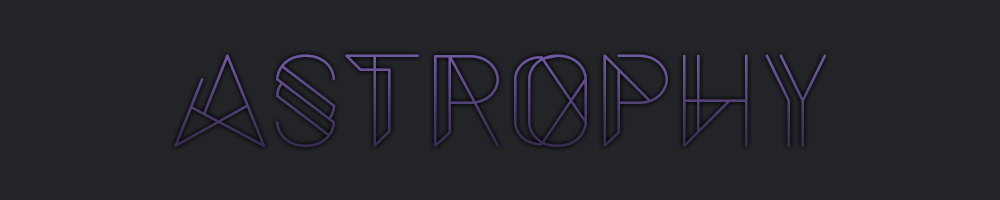
<style>
.page{position:relative;width:1000px;height:200px;background:#222428}
.page>*{position:absolute;margin:0}
.t1{font:120px "Metrica-Regular";letter-spacing:0.05em}
</style>
<div class="page">
<p class="t1" style="left:174px;top:54px;width:653px;height:94px">ASTROPHY</p>
</div>
